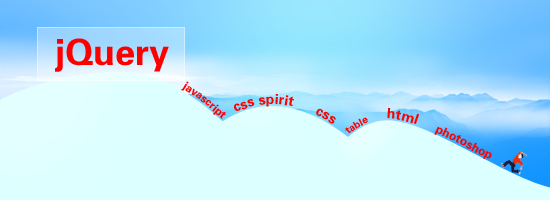
<style>
.page{position:relative;width:550px;height:200px;background:#dcffff}
.page>*{position:absolute;margin:0}
.t1{font:36px "FZDHTJW--GB1-0";color:#ff0000}
.t2{font:14px/36px "FZDHTJW--GB1-0";color:#ff0000}
.t3{font:11px/36px "FZDHTJW--GB1-0";color:#ff0000}
.t4{font:10px/36px "FZDHTJW--GB1-0";color:#ff0000}
.t5{font:12px/36px "FZDHTJW--GB1-0";color:#ff0000}
</style>
<div class="page">
<p class="t1" style="left:55px;top:38px;width:114px;height:34px">jQuery</p>
<p class="t2" style="left:181px;top:81px;width:311px;height:78px"><span class="t3">javascript    </span> css spirit      css  <span class="t4">    table </span>    html     <span class="t5">photoshop</span></p>
</div>
